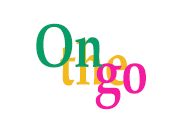
<style>
.page{position:relative;width:185px;height:116px;background:#ffffff}
.page>*{position:absolute;margin:0}
.t1{font:62.4px "BookAntiqua-Bold";color:#079d66;scale:0.77 1}
.t2{font:62.4px "BookAntiqua-Bold";scale:0.77 1}
.t3{font:62.4px "BookAntiqua-Bold";color:#f41ba0;scale:0.77 1}
</style>
<div class="page">
<p class="t1" style="left:36px;top:23px;width:67px;height:45px">On</p>
<p class="t2" style="left:60px;top:39px;width:67px;height:47px">the</p>
<p class="t3" style="left:95px;top:63px;width:51px;height:47px">go</p>
</div>
